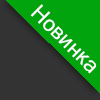
<style>
.page{position:relative;width:100px;height:100px;background:#333333}
.page>*{position:absolute;margin:0}
.t1{font:21.7px "MicrosoftSansSerif";color:#ffffff}
</style>
<div class="page">
<p class="t1" style="left:30px;top:4px;width:67px;height:70px;rotate:45deg">Новинка</p>
</div>
